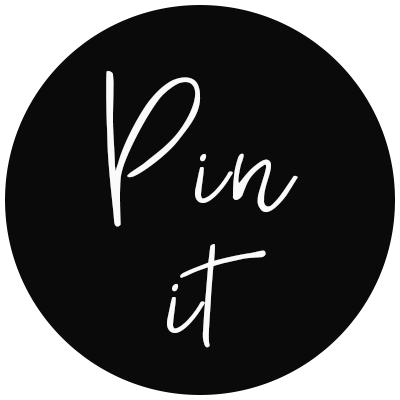
<style>
.page{position:relative;width:400px;height:400px;background:#0a0a0a}
.page>*{position:absolute;margin:0}
.t1{font:225px/130px "Foxglow-Regular";letter-spacing:0.025em;color:#ffffff}
</style>
<div class="page">
<p class="t1" style="left:106px;top:70px;width:192px;height:278px;text-align:center;opacity:0.97">Pin<br>it</p>
</div>
